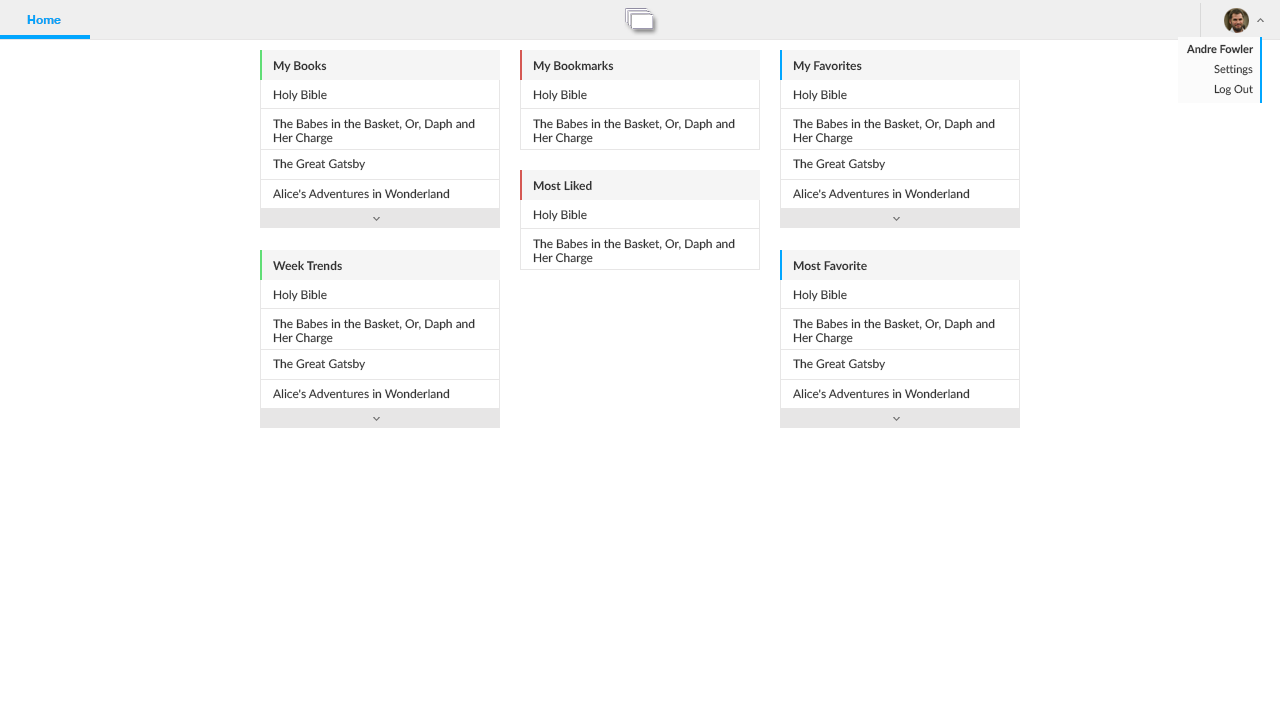
<style>
.page{position:relative;width:1280px;height:720px;background:#ffffff}
.page>*{position:absolute;margin:0}
.t1{font:12px "HelveticaNeue-Bold";color:#01a6ff}
.t2{font:11px "Lato-Bold";color:#333333}
.t3{font:12px "Lato-Bold";color:#333333}
.t4{font:11px "Lato-Regular";color:#333333}
.t5{font:12px "Lato-Regular";color:#333333}
</style>
<div class="page">
<p class="t1" style="left:27px;top:15px;width:34px;height:9px">Home</p>
<p class="t1" style="left:27px;top:15px;width:34px;height:9px">Home</p>
<p class="t2" style="left:1186px;top:44px;width:68px;height:10px">Andre Fowler</p>
<p class="t3" style="left:273px;top:60px;width:54px;height:13px">My Books</p>
<p class="t3" style="left:533px;top:60px;width:81px;height:13px">My Bookmarks</p>
<p class="t3" style="left:793px;top:61px;width:69px;height:12px">My Favorites</p>
<p class="t4" style="left:1214px;top:64px;width:39px;height:12px">Settings</p>
<p class="t4" style="left:1214px;top:84px;width:39px;height:12px">Log Out</p>
<p class="t5" style="left:273px;top:90px;width:54px;height:12px">Holy Bible</p>
<p class="t5" style="left:533px;top:90px;width:54px;height:12px">Holy Bible</p>
<p class="t5" style="left:793px;top:90px;width:54px;height:12px">Holy Bible</p>
<p class="t5" style="left:273px;top:119px;width:202px;height:26px">The Babes in the Basket, Or, Daph and <br>Her Charge</p>
<p class="t5" style="left:533px;top:119px;width:202px;height:26px">The Babes in the Basket, Or, Daph and <br>Her Charge</p>
<p class="t5" style="left:793px;top:119px;width:202px;height:26px">The Babes in the Basket, Or, Daph and <br>Her Charge</p>
<p class="t5" style="left:273px;top:159px;width:93px;height:12px">The Great Gatsby</p>
<p class="t5" style="left:793px;top:159px;width:93px;height:12px">The Great Gatsby</p>
<p class="t3" style="left:533px;top:180px;width:59px;height:11px">Most Liked</p>
<p class="t5" style="left:273px;top:189px;width:177px;height:10px">Alice's Adventures in Wonderland</p>
<p class="t5" style="left:793px;top:189px;width:177px;height:10px">Alice's Adventures in Wonderland</p>
<p class="t5" style="left:533px;top:210px;width:54px;height:12px">Holy Bible</p>
<p class="t5" style="left:533px;top:239px;width:202px;height:26px">The Babes in the Basket, Or, Daph and <br>Her Charge</p>
<p class="t3" style="left:273px;top:260px;width:69px;height:11px">Week Trends</p>
<p class="t3" style="left:793px;top:261px;width:74px;height:10px">Most Favorite</p>
<p class="t5" style="left:273px;top:290px;width:54px;height:12px">Holy Bible</p>
<p class="t5" style="left:793px;top:290px;width:54px;height:12px">Holy Bible</p>
<p class="t5" style="left:273px;top:319px;width:202px;height:26px">The Babes in the Basket, Or, Daph and <br>Her Charge</p>
<p class="t5" style="left:793px;top:319px;width:202px;height:26px">The Babes in the Basket, Or, Daph and <br>Her Charge</p>
<p class="t5" style="left:273px;top:359px;width:93px;height:12px">The Great Gatsby</p>
<p class="t5" style="left:793px;top:359px;width:93px;height:12px">The Great Gatsby</p>
<p class="t5" style="left:273px;top:389px;width:177px;height:10px">Alice's Adventures in Wonderland</p>
<p class="t5" style="left:793px;top:389px;width:177px;height:10px">Alice's Adventures in Wonderland</p>
</div>
